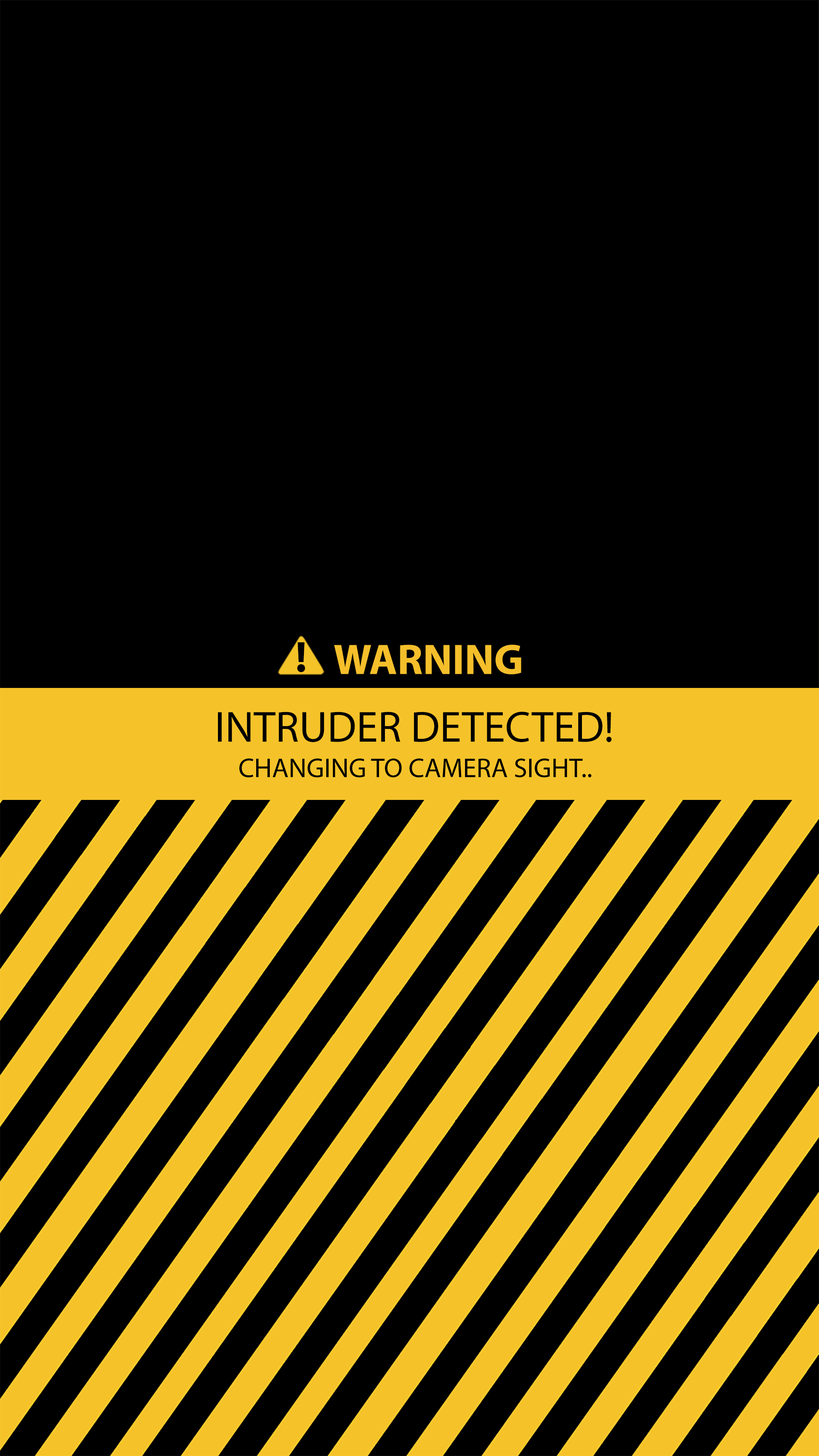
<style>
.page{position:relative;width:819px;height:1456px;background:#000000}
.page>*{position:absolute;margin:0}
.t1{font:43.7px "MyriadPro-Bold";color:#000000}
.t2{font:42.8px "MyriadPro-Bold";color:#f5bf2b}
.t3{font:43.7px "MyriadPro-Regular";color:#000000}
.t4{font:27.3px "MyriadPro-Regular";color:#000000}
</style>
<div class="page">
<p class="t1" style="left:297px;top:642px;width:8px;height:30px">!</p>
<p class="t2" style="left:334px;top:645px;width:187px;height:29px">WARNING</p>
<p class="t3" style="left:218px;top:712px;width:394px;height:30px">INTRUDER DETECTED!</p>
<p class="t4" style="left:239px;top:758px;width:352px;height:20px">CHANGING TO CAMERA SIGHT..</p>
</div>
